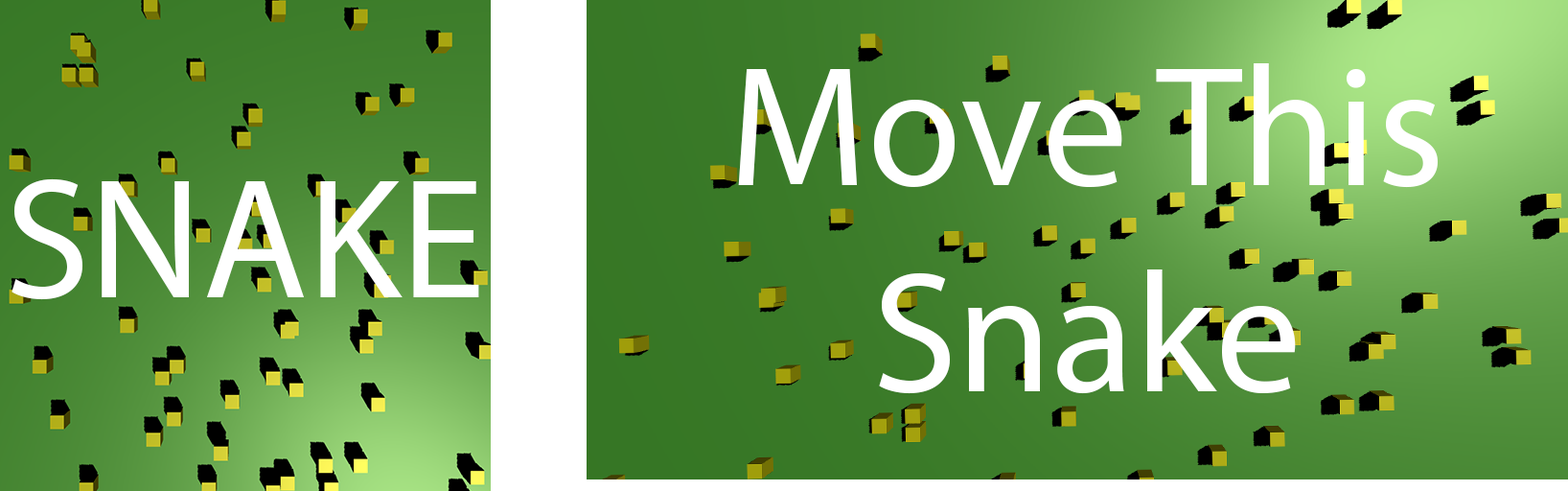
<style>
.page{position:relative;width:1568px;height:491px}
.page>*{position:absolute;margin:0}
.t1{font:171.7px "MyriadPro-Regular";color:#ffffff}
</style>
<div class="page">
<p class="t1" style="left:738px;top:63px;width:700px;height:331px;text-align:center">Move This<br>Snake</p>
<p class="t1" style="left:12px;top:178px;width:467px;height:122px">SNAKE</p>
</div>
